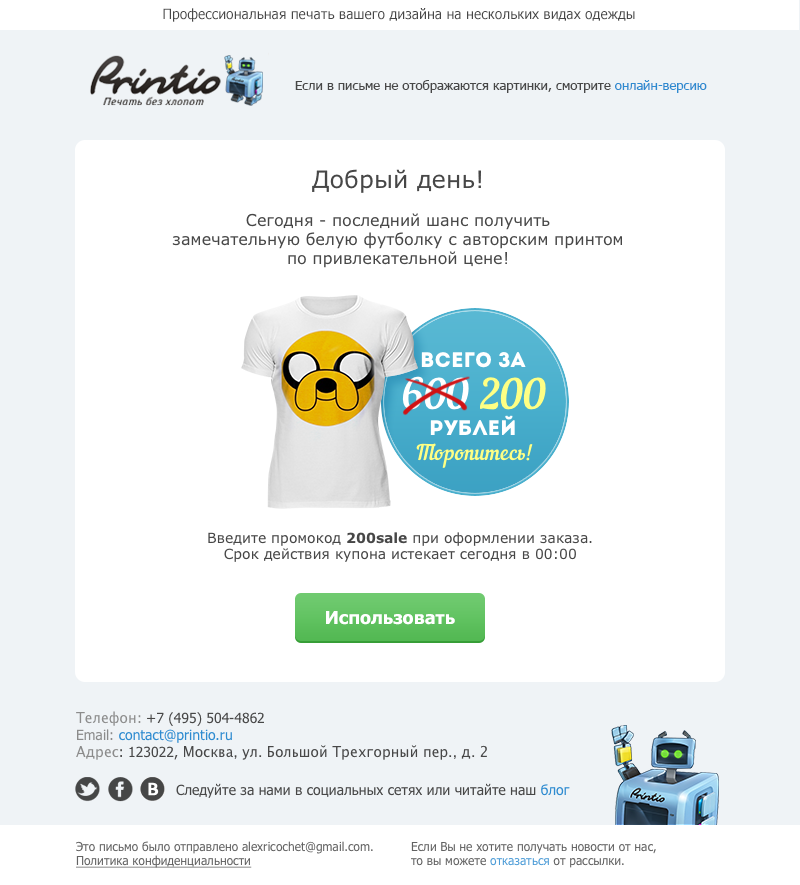
<style>
.page{position:relative;width:800px;height:885px;background:#ffffff}
.page>*{position:absolute;margin:0}
.t1{font:14px "Tahoma";color:#474747}
.t2{font:13px "Tahoma";color:#474747}
.t3{font:13px "Tahoma";color:#2e8bd0}
.t4{font:16px "Verdana";color:#474747}
.t5{font:24px "Verdana";color:#474747}
.t6{font:14px "Verdana";color:#474747}
.t7{font:14px "Verdana-Bold";color:#474747}
.t8{font:18px "Tahoma-Bold";color:#ffffff}
.t9{font:14px "LucidaGrande";color:#474747}
.t10{font:14px "LucidaGrande";color:#8c8c8c}
.t11{font:14px "Tahoma";color:#8c8c8c}
.t12{font:14px "Tahoma";color:#8b8b8b}
.t13{font:14px "Tahoma";color:#2e8bd0}
.t14{font:14px "LucidaGrande";color:#8b8b8b}
.t15{font:12px "Tahoma";color:#626262}
.t16{font:12px "Tahoma";color:#626262;text-decoration:underline}
</style>
<div class="page">
<p class="t1" style="left:163px;top:8px;width:472px;height:14px">Профессиональная печать вашего дизайна на нескольких видах одежды</p>
<p class="t2" style="left:295px;top:80px;width:412px;height:13px">Если в письме не отображаются картинки, смотрите <span class="t3">онлайн-версию</span></p>
<p class="t4" style="left:172px;top:169px;width:450px;height:99px;text-align:center"><span class="t5">Добрый день!<br></span><br>Сегодня - последний шанс получить<br>замечательную белую футболку с авторским принтом<br>по привлекательной цене!</p>
<p class="t6" style="left:208px;top:532px;width:384px;height:30px;text-align:center">Введите промокод <span class="t7">200sale</span> при оформлении заказа.<br>Срок действия купона истекает сегодня в 00:00</p>
<p class="t8" style="left:326px;top:611px;width:129px;height:14px">Использовать</p>
<p class="t9" style="left:76px;top:711px;width:411px;height:49px"><span class="t10">Телефон</span><span class="t11">:</span><span class="t1"> +7 (495) 504-4862<br></span><span class="t12">Email: </span><span class="t13">contact@printio.ru<br></span><span class="t14">Адрес</span><span class="t1">: 123022, </span>Москва, ул. Большой Трехгорный пер., д. 2</p>
<p class="t1" style="left:176px;top:783px;width:394px;height:15px">Следуйте за нами в социальных сетях или читайте наш <span class="t13">блог</span></p>
<p class="t15" style="left:76px;top:841px;width:297px;height:27px;text-align:right">Это письмо было отправлено alexricochet@gmail.com.<br><span class="t16">Политика конфиденциальности</span></p>
<p class="t15" style="left:411px;top:842px;width:245px;height:26px;text-align:right">Если Вы не хотите получать новости от нас,<br>то вы можете отказаться от рассылки.</p>
</div>
